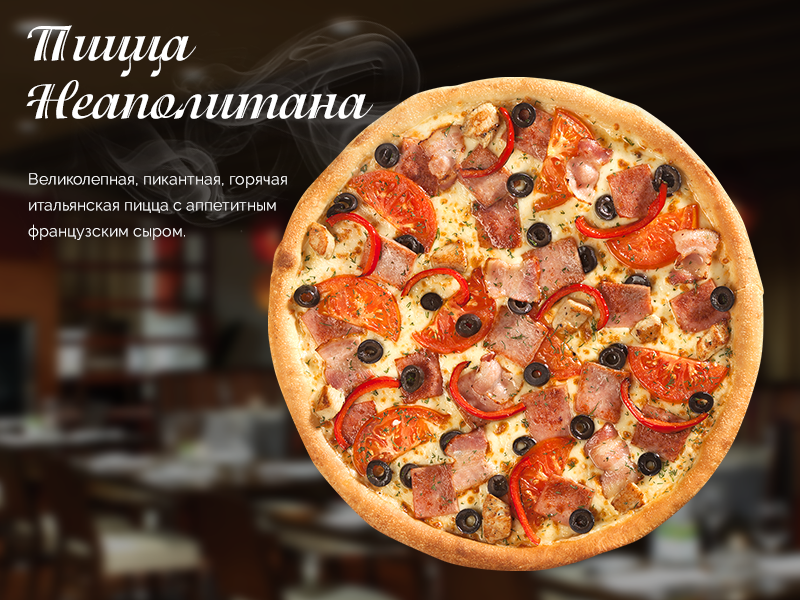
<style>
.page{position:relative;width:800px;height:600px}
.page>*{position:absolute;margin:0}
.t1{font:52px "1IsadoraMBold";color:#ffffff}
.t2{font:16px/26px "Raleway-Regular";color:#ffffff}
</style>
<div class="page">
<p class="t1" style="left:27px;top:25px;width:170px;height:52px">Пицца</p>
<p class="t1" style="left:26px;top:80px;width:348px;height:39px">Неаполитана</p>
<p class="t2" style="left:28px;top:173px;width:259px;height:67px">Великолепная, пикантная, горячая <br>итальянская пицца с аппетитным <br>французским сыром.</p>
</div>
